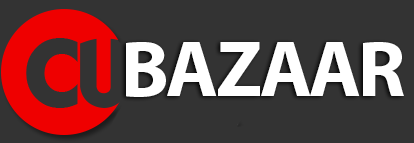
<style>
.page{position:relative;width:414px;height:143px;background:#333333}
.page>*{position:absolute;margin:0}
.t1{font:80px "MyriadPro-Bold";letter-spacing:-0.04em;color:#ffffff}
</style>
<div class="page">
<p class="t1" style="left:126px;top:42px;width:278px;height:55px">BAZAAR</p>
</div>
